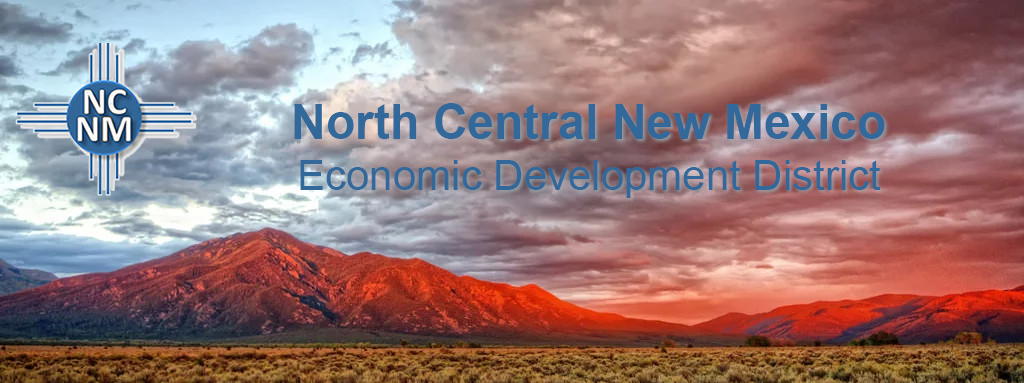
<style>
.page{position:relative;width:1024px;height:383px}
.page>*{position:absolute;margin:0}
.t1{font:42px "ArialMT";color:#33689a}
.t2{font:48px "Arial-BoldMT";color:#33689a}
</style>
<div class="page">
<p class="t1" style="left:294px;top:103px;width:591px;height:95px;text-align:center"><span class="t2">North Central New Mexico<br></span> Economic Development District</p>
</div>
